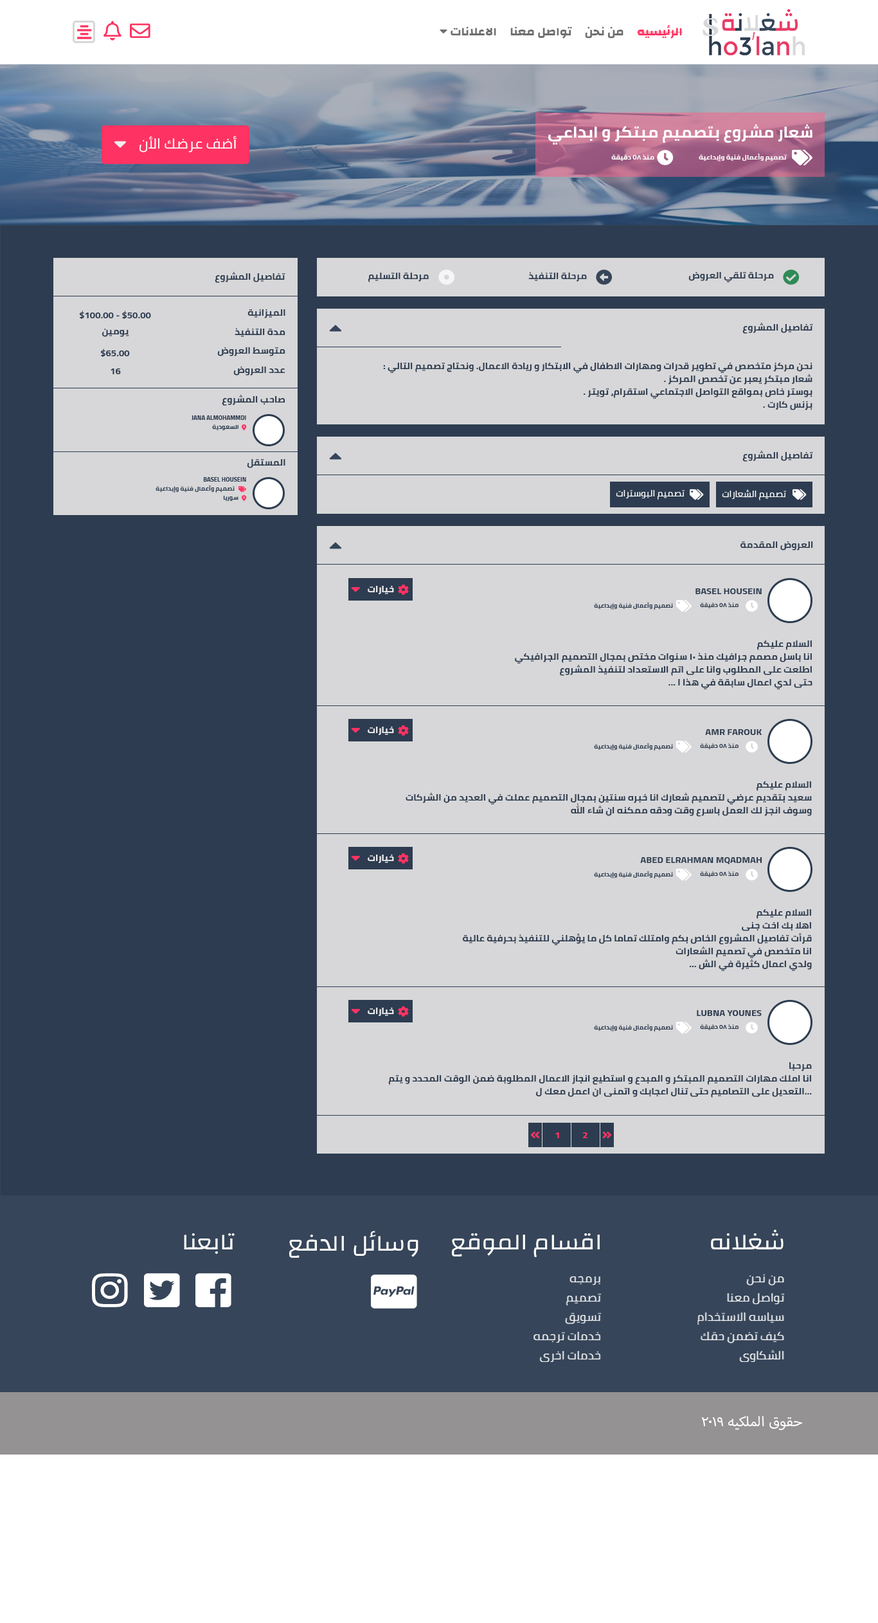
<style>
.page{position:relative;width:878px;height:1623px;background:#d7d7d9}
.page>*{position:absolute;margin:0}
.t1{font:15.4px "Cairo-Bold";color:#ffffff;text-transform:uppercase;scale:1.06 1}
.t2{font:14.1px "Cairo";color:#ffffff;text-transform:uppercase;scale:1.06 1}
.t3{font:6.4px "Cairo-Bold";color:#ffffff;text-transform:uppercase;scale:1.06 1}
.t4{font:9px "Cairo-Bold";color:#2d3c50;text-transform:uppercase;scale:1.06 1}
.t5{font:9px/12.9px "Cairo-Bold";color:#2d3c50;scale:1.06 1}
.t6{font:5.8px "Cairo-Bold";color:#2d3c50;text-transform:uppercase;scale:1.06 1}
.t7{font:9px "Cairo";color:#ffffff;text-transform:uppercase;scale:1.06 1}
.t8{font:9px "Cairo-Bold";color:#eeeeee;scale:1.06 1}
.t9{font:9px "Cairo-Bold";color:#ff3363;text-transform:uppercase;scale:1.06 1}
.t10{font:23.1px "Changa-Regular";color:#ffffff;text-transform:uppercase;scale:1.06 1}
.t11{font:11.6px/19.3px "Cairo-Regular";color:#ffffff;text-transform:uppercase;scale:1.06 1}
.t12{font:19.3px "MyriadArabic-Regular";color:#ffffff;text-transform:uppercase;scale:1.06 1}
</style>
<div class="page">
<p class="t1" style="left:548px;top:124px;width:265px;height:21px">شعار مشروع بتصميم مبتكر و ابداعي</p>
<p class="t2" style="left:139px;top:136px;width:98px;height:16px">أضف عرضك الأن</p>
<p class="t3" style="left:611px;top:154px;width:43px;height:7px">منذ 58 دقيقة</p>
<p class="t3" style="left:699px;top:153px;width:88px;height:8px">تصميم وأعمال فنية وإبداعية</p>
<p class="t4" style="left:215px;top:271px;width:70px;height:12px">تفاصيل المشروع</p>
<p class="t4" style="left:368px;top:272px;width:61px;height:10px">مرحلة التسليم</p>
<p class="t4" style="left:528px;top:272px;width:59px;height:10px">مرحلة التنفيذ</p>
<p class="t4" style="left:688px;top:271px;width:86px;height:12px">مرحلة تلقي العروض</p>
<p class="t4" style="left:79px;top:310px;width:72px;height:9px">$100.00 - $50.00</p>
<p class="t4" style="left:248px;top:309px;width:37px;height:9px">الميزانية</p>
<p class="t4" style="left:102px;top:328px;width:27px;height:9px">يومين</p>
<p class="t4" style="left:235px;top:328px;width:50px;height:9px">مدة التنفيذ</p>
<p class="t4" style="left:742px;top:322px;width:71px;height:12px">تفاصيل المشروع</p>
<p class="t4" style="left:100px;top:348px;width:30px;height:9px">$65.00</p>
<p class="t4" style="left:217px;top:346px;width:68px;height:10px">متوسط العروض</p>
<p class="t4" style="left:233px;top:366px;width:52px;height:9px">عدد العروض</p>
<p class="t5" style="left:383px;top:362px;width:430px;height:48px;text-align:right">: نحن مركز متخصص في تطوير قدرات ومهارات الاطفال في الابتكار و ريادة الاعمال. ونحتاج تصميم التالي<br>. شعار مبتكر يعبر عن تخصص المركز<br>. بوستر خاص بمواقع التواصل الاجتماعي استقرام، تويتر<br>. بزنس كارت</p>
<p class="t4" style="left:111px;top:368px;width:10px;height:6px">16</p>
<p class="t4" style="left:222px;top:394px;width:63px;height:12px">صاحب المشروع</p>
<p class="t6" style="left:192px;top:415px;width:54px;height:5px">jana Almohammdi</p>
<p class="t6" style="left:212px;top:424px;width:27px;height:6px">السعودية</p>
<p class="t4" style="left:247px;top:458px;width:38px;height:10px">المستقل</p>
<p class="t4" style="left:742px;top:450px;width:71px;height:12px">تفاصيل المشروع</p>
<p class="t6" style="left:156px;top:485px;width:79px;height:7px">تصميم وأعمال فنية وإبداعية</p>
<p class="t6" style="left:203px;top:477px;width:43px;height:5px">Basel Housein</p>
<p class="t6" style="left:223px;top:496px;width:16px;height:5px">سوريا</p>
<p class="t7" style="left:616px;top:490px;width:69px;height:10px">تصميم البوسترات</p>
<p class="t7" style="left:722px;top:489px;width:64px;height:11px">تصميم الشعارات</p>
<p class="t4" style="left:740px;top:541px;width:73px;height:9px">العروض المقدمة</p>
<p class="t8" style="left:368px;top:585px;width:26px;height:9px">خيارات</p>
<p class="t4" style="left:696px;top:588px;width:66px;height:6px">Basel Housein</p>
<p class="t6" style="left:594px;top:602px;width:79px;height:7px">تصميم وأعمال فنية وإبداعية</p>
<p class="t6" style="left:700px;top:602px;width:39px;height:6px">منذ 58 دقيقة</p>
<p class="t5" style="left:515px;top:640px;width:298px;height:50px;text-align:right">السلام عليكم<br>انا باسل مصمم جرافيك منذ 10 سنوات مختص بمجال التصميم الجرافيكي<br>اطلعت على المطلوب وانا على اتم الاستعداد لتنفيذ المشروع<br> ... حتى لدي اعمال سابقة في هذا ا</p>
<p class="t8" style="left:368px;top:726px;width:26px;height:9px">خيارات</p>
<p class="t4" style="left:705px;top:729px;width:57px;height:6px">amr farouk</p>
<p class="t6" style="left:594px;top:742px;width:79px;height:8px">تصميم وأعمال فنية وإبداعية</p>
<p class="t6" style="left:700px;top:743px;width:39px;height:6px">منذ 58 دقيقة</p>
<p class="t5" style="left:406px;top:781px;width:406px;height:35px;text-align:right">السلام عليكم<br>سعيد بتقديم عرضي لتصميم شعارك انا خبره سنتين بمجال التصميم عملت في العديد من الشركات وسوف انجز لك العمل باسرع وقت ودقه ممكنه ان شاء الله</p>
<p class="t8" style="left:368px;top:854px;width:26px;height:9px">خيارات</p>
<p class="t4" style="left:640px;top:857px;width:122px;height:7px">Abed Elrahman Mqadmah</p>
<p class="t6" style="left:594px;top:870px;width:79px;height:8px">تصميم وأعمال فنية وإبداعية</p>
<p class="t6" style="left:700px;top:871px;width:39px;height:6px">منذ 58 دقيقة</p>
<p class="t5" style="left:462px;top:909px;width:350px;height:62px;text-align:right">السلام عليكم<br>اهلا بك اخت جنى<br>قرأت تفاصيل المشروع الخاص بكم وامتلك تماما كل ما يؤهلني للتنفيذ بحرفية عالية<br>انا متخصص في تصميم الشعارات<br>... ولدي اعمال كثيرة في الش</p>
<p class="t8" style="left:368px;top:1007px;width:26px;height:9px">خيارات</p>
<p class="t4" style="left:697px;top:1010px;width:65px;height:6px">lubna younes</p>
<p class="t6" style="left:594px;top:1023px;width:79px;height:8px">تصميم وأعمال فنية وإبداعية</p>
<p class="t6" style="left:700px;top:1024px;width:39px;height:6px">منذ 58 دقيقة</p>
<p class="t5" style="left:388px;top:1062px;width:424px;height:35px;text-align:right">مرحبا<br>انا املك مهارات التصميم المبتكر و المبدع و استطيع انجاز الاعمال المطلوبة ضمن الوقت المحدد و يتم التعديل على التصاميم حتى تنال اعجابك و اتمنى ان اعمل معك ل...</p>
<p class="t9" style="left:555px;top:1132px;width:4px;height:6px">1</p>
<p class="t9" style="left:583px;top:1132px;width:5px;height:6px">2</p>
<p class="t10" style="left:711px;top:1229px;width:73px;height:20px">شغلانه</p>
<p class="t10" style="left:184px;top:1232px;width:51px;height:22px">تابعنا</p>
<p class="t10" style="left:289px;top:1230px;width:130px;height:27px">وسائل الدفع</p>
<p class="t10" style="left:451px;top:1232px;width:149px;height:25px">اقسام الموقع</p>
<p class="t11" style="left:534px;top:1275px;width:68px;height:87px">برمجه <br>تصميم<br>تسويق <br>خدمات ترجمه<br>خدمات اخرى</p>
<p class="t11" style="left:698px;top:1274px;width:86px;height:88px">من نحن<br>تواصل معنا<br>سياسه الاستخدام <br>كيف تضمن حقك<br>الشكاوى</p>
<p class="t12" style="left:701px;top:1416px;width:101px;height:14px">حقوق الملكيه 2019</p>
</div>
